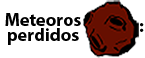
<style>
.page{position:relative;width:145px;height:58px;background:#ffffff}
.page>*{position:absolute;margin:0}
.t1{font:18.1px/15.1px "MyriadPro-Bold";color:#000000}
.t2{font:18.1px "MyriadPro-Bold";color:#000000}
.t3{font:8.2px "MyriadPro-Bold";color:#000000}
</style>
<div class="page">
<p class="t1" style="left:5px;top:13px;width:76px;height:32px;text-align:center">Meteoros <br>perdidos</p>
<p class="t2" style="left:140px;top:23px;width:4px;height:9px"><span class="t3"><br></span>:</p>
</div>
